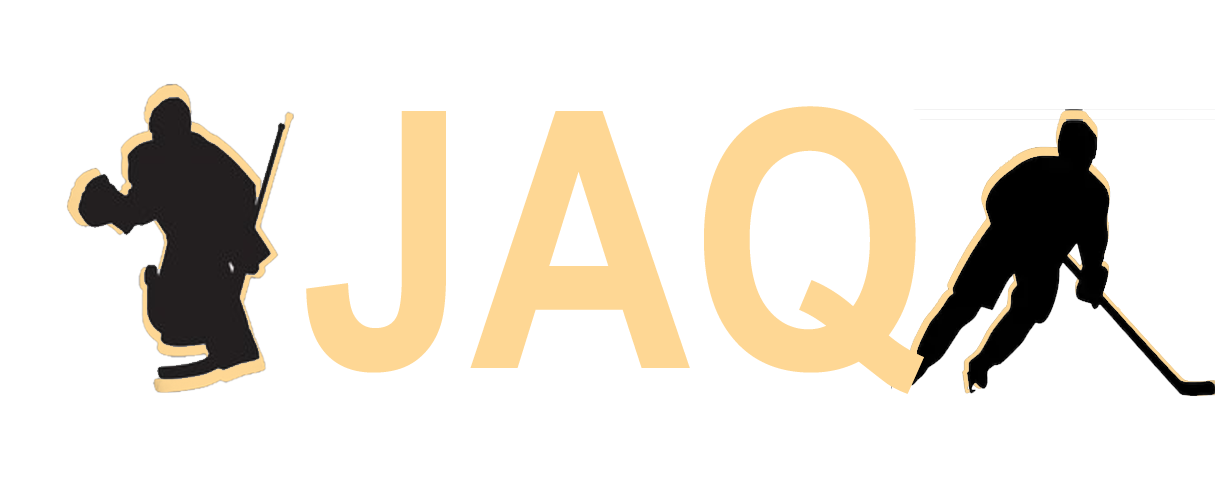
<style>
.page{position:relative;width:1228px;height:500px;background:#ffffff}
.page>*{position:absolute;margin:0}
.t1{font:358.7px "Arial-BoldMT";color:#fed794;scale:0.85 1}
</style>
<div class="page">
<p class="t1" style="left:306px;top:106px;width:618px;height:288px">JAQ</p>
</div>
